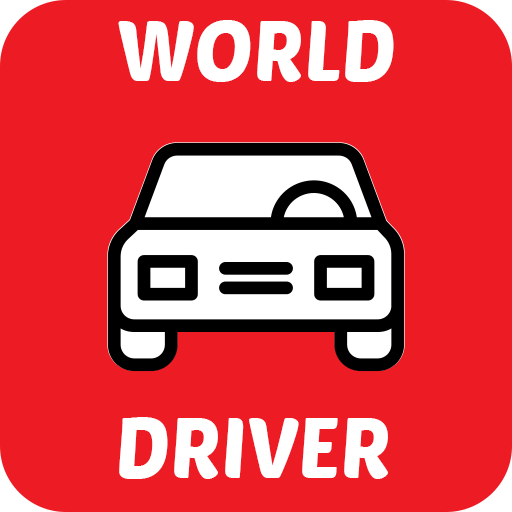
<style>
.page{position:relative;width:512px;height:512px;background:#ed1c24}
.page>*{position:absolute;margin:0}
.t1{font:82.5px "PoetsenOne-Regular";color:#ffffff}
</style>
<div class="page">
<p class="t1" style="left:118px;top:20px;width:276px;height:62px">WORLD</p>
<p class="t1" style="left:119px;top:417px;width:269px;height:62px">DRIVER</p>
</div>
